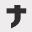
<style>
.page{position:relative;width:32px;height:32px;background:#eeecec}
.page>*{position:absolute;margin:0}
.t1{font:26.1px "Lee_katakana-Black";letter-spacing:0.05em;color:#2f2d2d}
</style>
<div class="page">
<p class="t1" style="left:6px;top:5px;width:21px;height:24px">ナ</p>
</div>
